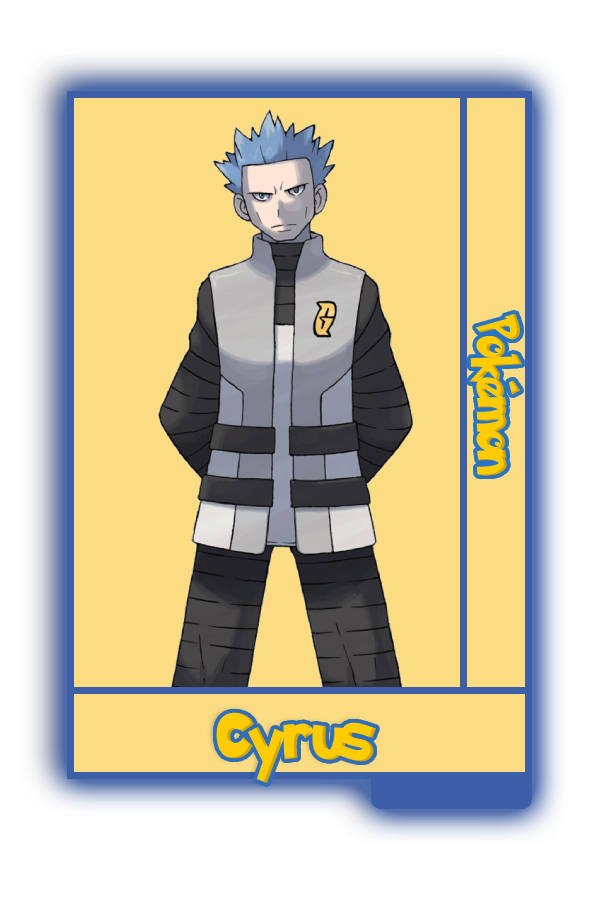
<style>
.page{position:relative;width:600px;height:900px;background:#fbdc83}
.page>*{position:absolute;margin:0}
.t1{font:48.8px "PokemonSolidNormal";color:#ffcb05;scale:0.8 1}
.t2{font:56.6px "PokemonSolidNormal";color:#ffcb05;scale:0.92 1}
</style>
<div class="page">
<p class="t1" style="left:469px;top:313px;width:54px;height:163px;rotate:90deg">Pokémon</p>
<p class="t2" style="left:216px;top:712px;width:161px;height:71px">Cyrus</p>
</div>
